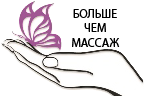
<style>
.page{position:relative;width:144px;height:96px;background:#ffffff}
.page>*{position:absolute;margin:0}
.t1{font:12px "MyriadPro-Regular";color:#000000}
</style>
<div class="page">
<p class="t1" style="left:72px;top:9px;width:48px;height:38px;text-align:center">БОЛЬШЕ<br>ЧЕМ<br>МАССАЖ</p>
</div>
